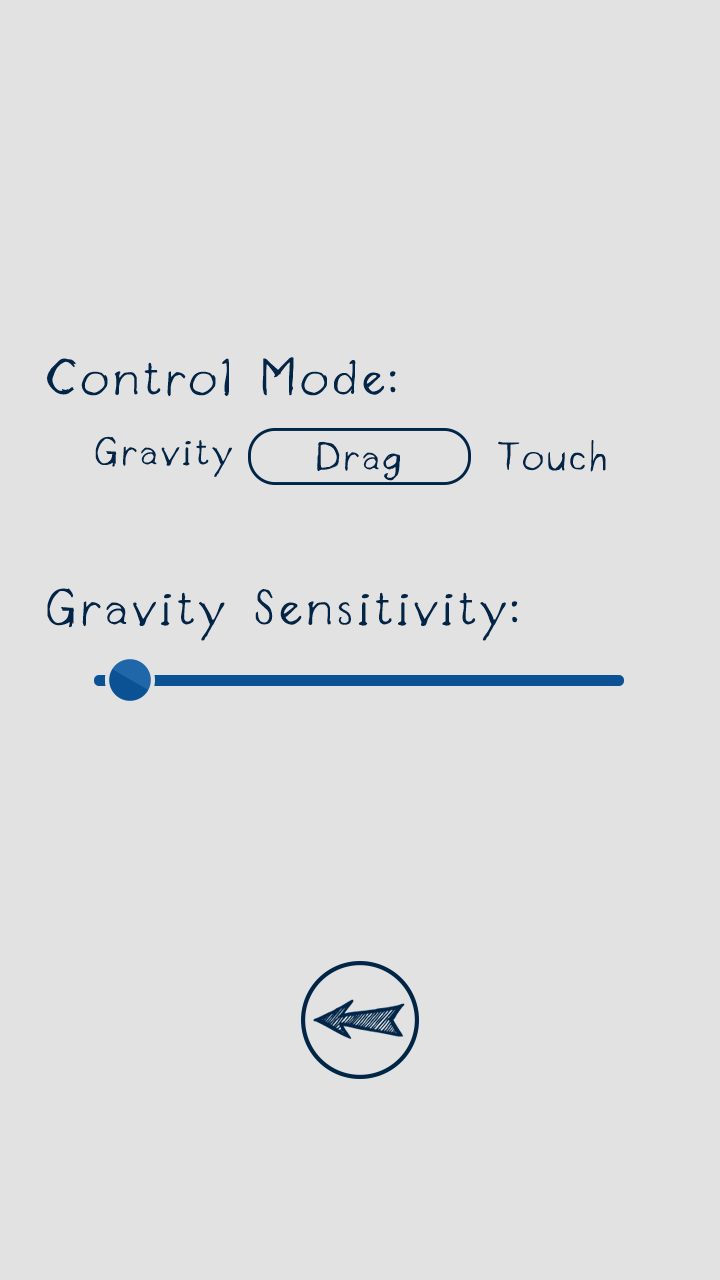
<style>
.page{position:relative;width:720px;height:1280px;background:#e2e2e2}
.page>*{position:absolute;margin:0}
.t1{font:54.2px "DesignerNotes";letter-spacing:0.095em;color:#002547}
.t2{font:41.7px "DesignerNotes";letter-spacing:0.095em;color:#002547}
</style>
<div class="page">
<p class="t1" style="left:47px;top:357px;width:349px;height:40px">Control Mode:</p>
<p class="t2" style="left:95px;top:436px;width:137px;height:41px">Gravity</p>
<p class="t2" style="left:317px;top:441px;width:83px;height:40px">Drag</p>
<p class="t2" style="left:498px;top:439px;width:108px;height:33px">Touch</p>
<p class="t1" style="left:47px;top:588px;width:471px;height:53px">Gravity Sensitivity:</p>
</div>
